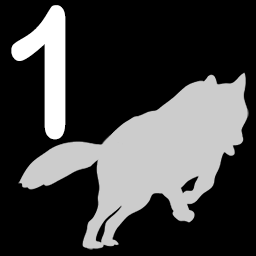
<style>
.page{position:relative;width:256px;height:256px;background:#000000}
.page>*{position:absolute;margin:0}
.t1{font:182.4px "ArialRoundedMTBold";letter-spacing:-0.4em;color:#ffffff;font-variant:small-caps;scale:0.83 1}
</style>
<div class="page">
<p class="t1" style="left:11px;top:5px;width:55px;height:135px">1</p>
</div>
